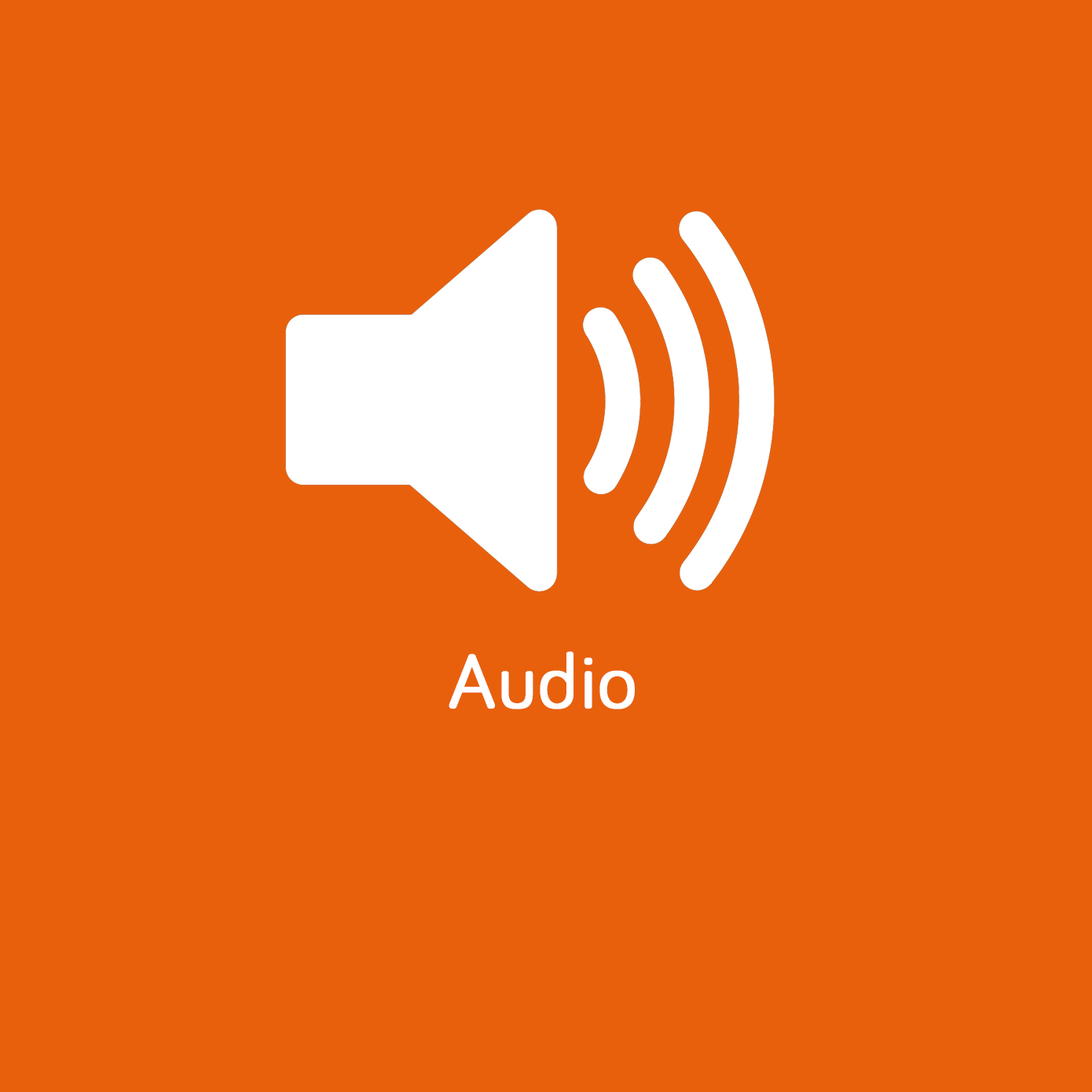
<style>
.page{position:relative;width:1092px;height:1092px;background:#e8600c}
.page>*{position:absolute;margin:0}
.t1{font:77.8px "Bariol-Regular";letter-spacing:0.01em;color:#ffffff;font-weight:bold}
</style>
<div class="page">
<p class="t1" style="left:449px;top:651px;width:186px;height:58px">Audio</p>
</div>
